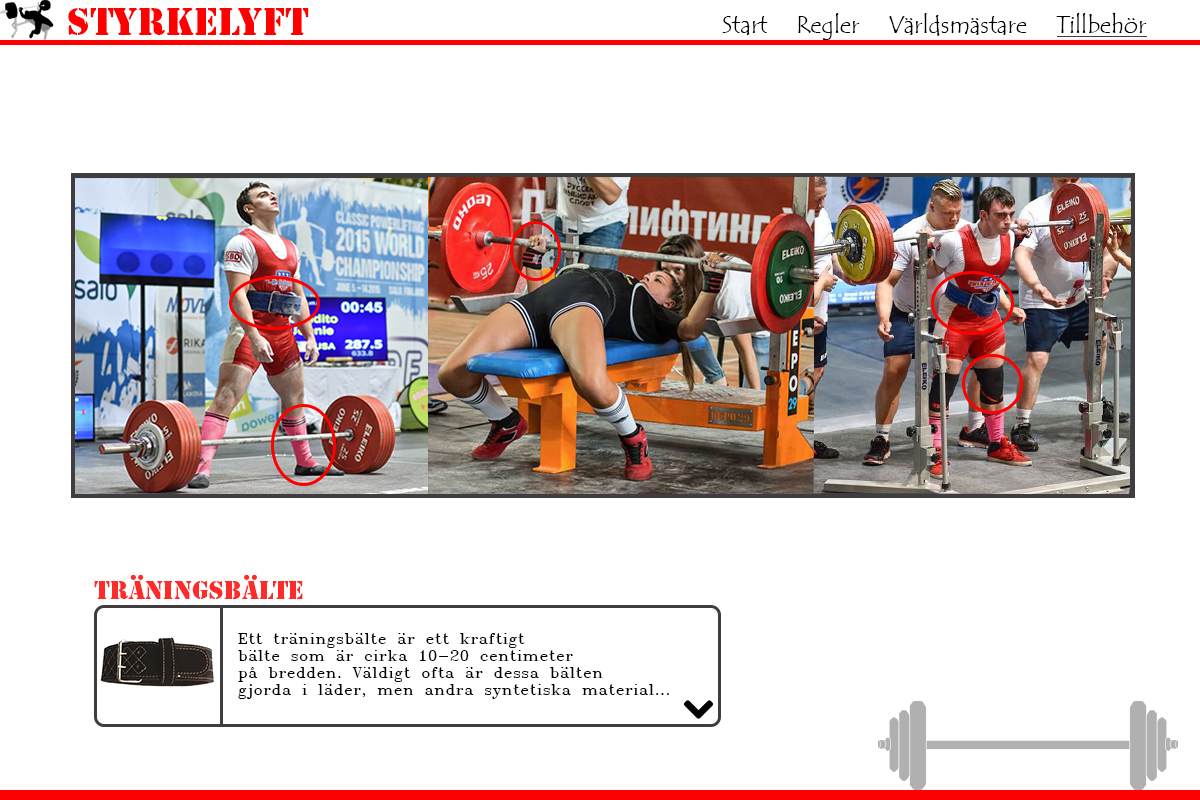
<style>
.page{position:relative;width:1200px;height:800px;background:#ffffff}
.page>*{position:absolute;margin:0}
.t1{font:36px "StencilStd";color:#fe0000}
.t2{font:24px "TempusSansITC";color:#000000}
.t3{font:24px "StencilStd";color:#fe2b2b}
.t4{font:14px "SWRomnt";color:#000000}
</style>
<div class="page">
<p class="t1" style="left:68px;top:8px;width:241px;height:27px">Styrkelyft</p>
<p class="t2" style="left:722px;top:16px;width:46px;height:19px">Start</p>
<p class="t2" style="left:798px;top:13px;width:62px;height:27px">Regler</p>
<p class="t2" style="left:889px;top:13px;width:138px;height:23px">Världsmästare</p>
<p class="t2" style="left:1056px;top:12px;width:91px;height:21px">Tillbehör</p>
<p class="t3" style="left:94px;top:574px;width:209px;height:25px">Träningsbälte</p>
<p class="t4" style="left:238px;top:633px;width:431px;height:66px">Ett träningsbälte är ett kraftigt<br>bälte som är cirka 10-20 centimeter<br>på bredden. Väldigt ofta är dessa bälten<br>gjorda i läder, men andra syntetiska material...</p>
</div>
